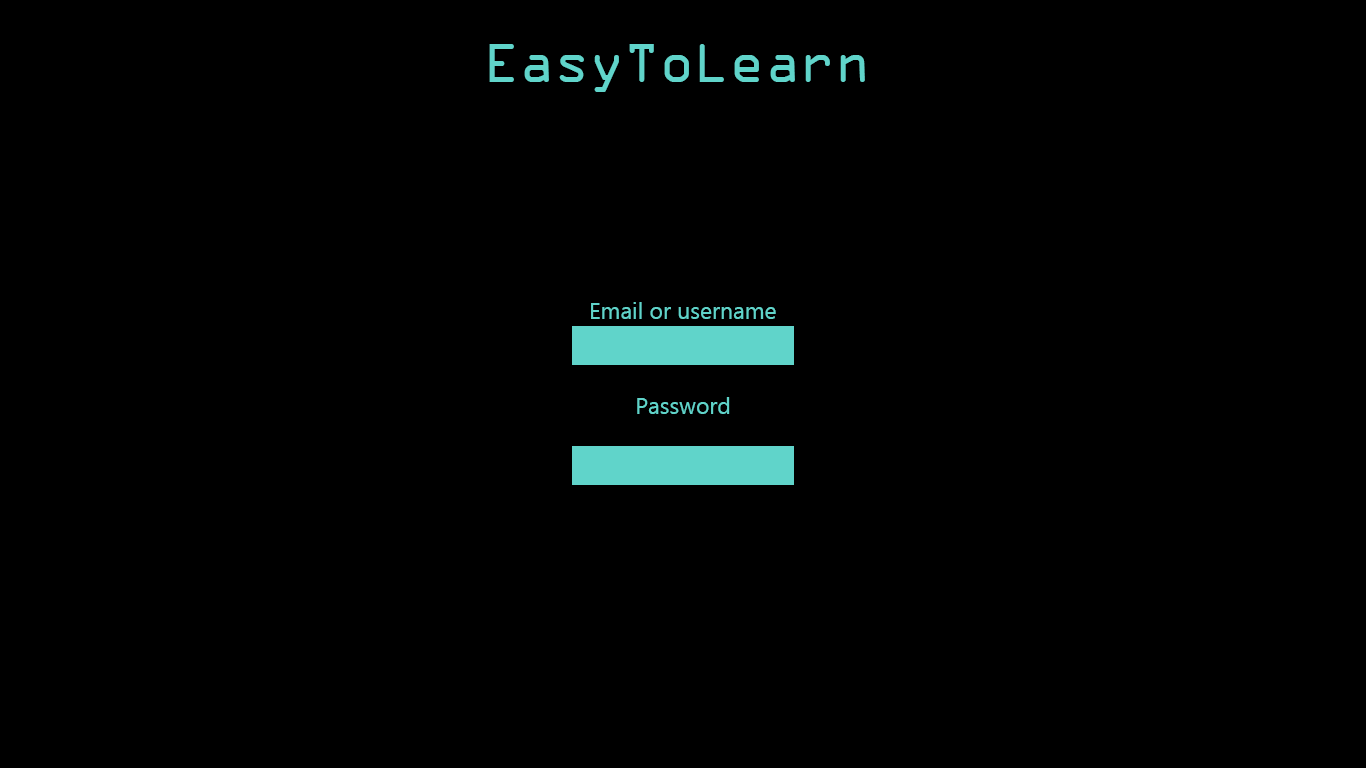
<style>
.page{position:relative;width:1366px;height:768px;background:#000000}
.page>*{position:absolute;margin:0}
.t1{font:58px "OCRAExtended";color:#60d4ca}
.t2{font:23px "Ebrima";color:#60d4ca}
</style>
<div class="page">
<p class="t1" style="left:489px;top:44px;width:376px;height:48px">EasyToLearn</p>
<p class="t2" style="left:591px;top:302px;width:185px;height:17px">Email or username</p>
<p class="t2" style="left:637px;top:397px;width:93px;height:17px">Password</p>
</div>
